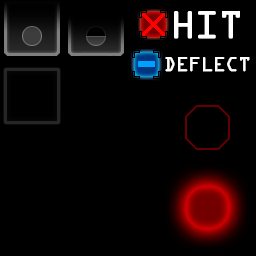
<style>
.page{position:relative;width:256px;height:256px;background:#000000}
.page>*{position:absolute;margin:0}
.t1{font:34.6px "OCRAStd";letter-spacing:-0.05em;color:#fefffe;text-transform:uppercase;font-weight:bold}
.t2{font:17.7px "OCRAStd";letter-spacing:-0.05em;color:#fefffe;text-transform:uppercase;font-weight:bold}
</style>
<div class="page">
<p class="t1" style="left:174px;top:11px;width:66px;height:28px">HIT</p>
<p class="t2" style="left:165px;top:57px;width:85px;height:15px">DEFLECT</p>
</div>
